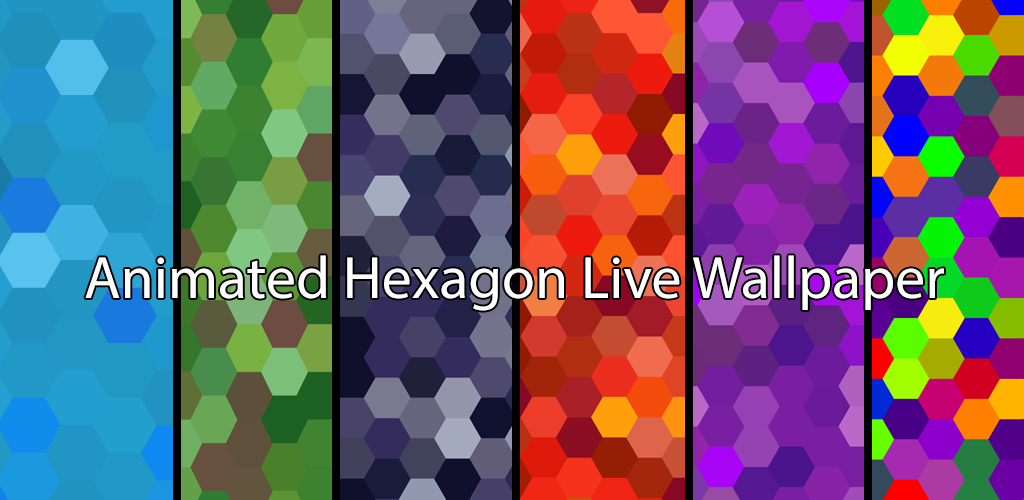
<style>
.page{position:relative;width:1024px;height:500px}
.page>*{position:absolute;margin:0}
.t1{font:60px "Roboto-Bold";color:#ffffff}
</style>
<div class="page">
<p class="t1" style="left:85px;top:255px;width:860px;height:56px">Animated Hexagon Live Wallpaper</p>
</div>
